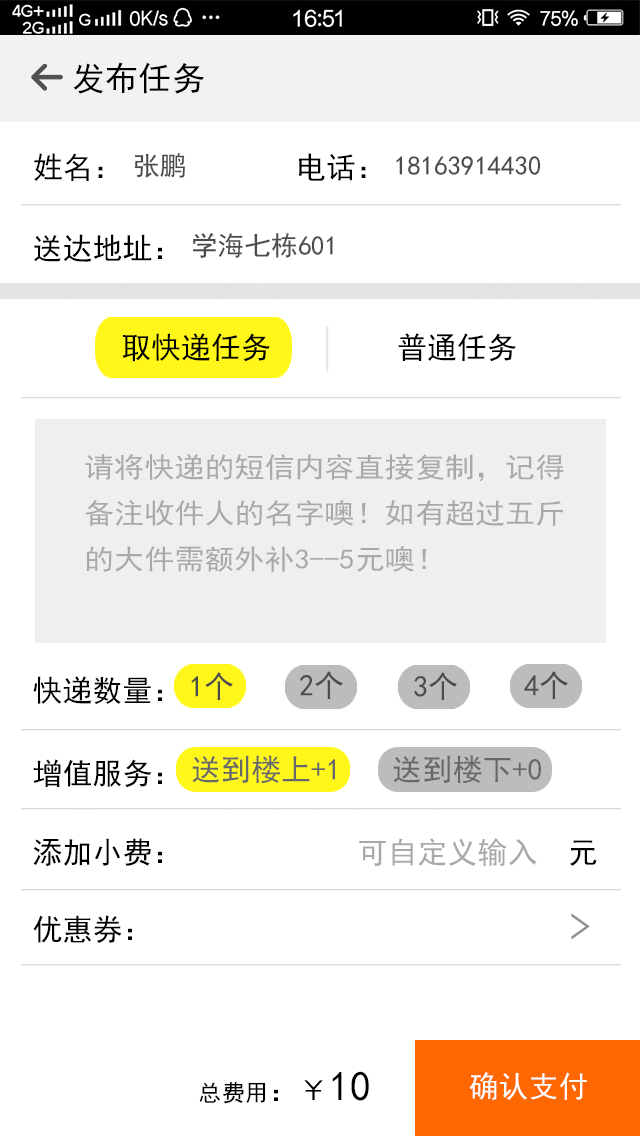
<style>
.page{position:relative;width:640px;height:1136px;background:#ffffff}
.page>*{position:absolute;margin:0}
.t1{font:33.3px "SimHei";letter-spacing:0.002em;color:#000000}
.t2{font:30px "SimHei";letter-spacing:0.002em;color:#000000}
.t3{font:26.7px "SimHei";letter-spacing:0.002em;color:#4b4b4b}
.t4{font:27.9px/46.5px "SimHei";letter-spacing:0.002em;color:#a9a9a9;scale:1.08 1}
.t5{font:30px "SimHei";letter-spacing:0.002em;color:#4b4b4b}
.t6{font:30px "SimHei";letter-spacing:0.002em;color:#686868}
.t7{font:30px "SimHei";letter-spacing:0.002em;color:#a9a9a9}
.t8{font:23.3px "SimHei";letter-spacing:0.002em;color:#000000}
.t9{font:41.7px "SimHei";letter-spacing:0.002em;color:#000000}
.t10{font:30px "SimHei";letter-spacing:0.002em;color:#ffffff}
</style>
<div class="page">
<p class="t1" style="left:73px;top:62px;width:131px;height:32px">发布任务</p>
<p class="t2" style="left:34px;top:153px;width:69px;height:28px">姓名：</p>
<p class="t3" style="left:134px;top:153px;width:51px;height:25px">张鹏</p>
<p class="t2" style="left:299px;top:153px;width:67px;height:28px">电话：</p>
<p class="t3" style="left:396px;top:156px;width:145px;height:19px">18163914430</p>
<p class="t3" style="left:192px;top:233px;width:141px;height:25px">学海七栋601</p>
<p class="t2" style="left:34px;top:234px;width:128px;height:28px">送达地址：</p>
<p class="t2" style="left:122px;top:333px;width:148px;height:29px">取快递任务</p>
<p class="t2" style="left:398px;top:333px;width:118px;height:29px">普通任务</p>
<p class="t4" style="left:85px;top:453px;width:479px;height:119px">请将快递的短信内容直接复制，记得<br>备注收件人的名字噢！如有超过五斤<br>的大件需额外补3--5元噢！</p>
<p class="t2" style="left:33px;top:676px;width:129px;height:28px">快递数量：</p>
<p class="t5" style="left:191px;top:672px;width:42px;height:28px">1个</p>
<p class="t5" style="left:300px;top:671px;width:43px;height:28px">2个</p>
<p class="t5" style="left:414px;top:672px;width:43px;height:28px">3个</p>
<p class="t5" style="left:524px;top:671px;width:44px;height:28px">4个</p>
<p class="t2" style="left:33px;top:759px;width:129px;height:29px">增值服务：</p>
<p class="t6" style="left:192px;top:755px;width:143px;height:29px">送到楼上+1</p>
<p class="t6" style="left:393px;top:755px;width:148px;height:29px">送到楼下+0</p>
<p class="t2" style="left:33px;top:838px;width:129px;height:29px">添加小费：</p>
<p class="t7" style="left:359px;top:838px;width:238px;height:29px">可自定义输入<span class="t2">  元</span></p>
<p class="t2" style="left:33px;top:915px;width:99px;height:28px">优惠券：</p>
<p class="t8" style="left:199px;top:1071px;width:170px;height:33px">总费用<span class="t2">：￥</span><span class="t9">10</span></p>
<p class="t10" style="left:469px;top:1072px;width:118px;height:29px">确认支付</p>
</div>
